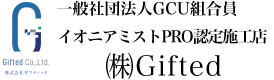
<style>
.page{position:relative;width:274px;height:80px;background:#ffffff}
.page>*{position:absolute;margin:0}
.t1{font:16px "HiraMinPro-W6";color:#000000}
.t2{font:16px "HiraMinPro-W6";letter-spacing:-0.075em;color:#000000}
.t3{font:28px "HiraMinPro-W3";letter-spacing:0.05em;color:#000000}
</style>
<div class="page">
<p class="t1" style="left:57px;top:1px;width:179px;height:15px">一般社団法人GCU組合員</p>
<p class="t2" style="left:58px;top:28px;width:209px;height:16px">イオニアミストPRO認定施工店</p>
<p class="t3" style="left:106px;top:52px;width:115px;height:28px">㈱Gifted</p>
</div>
